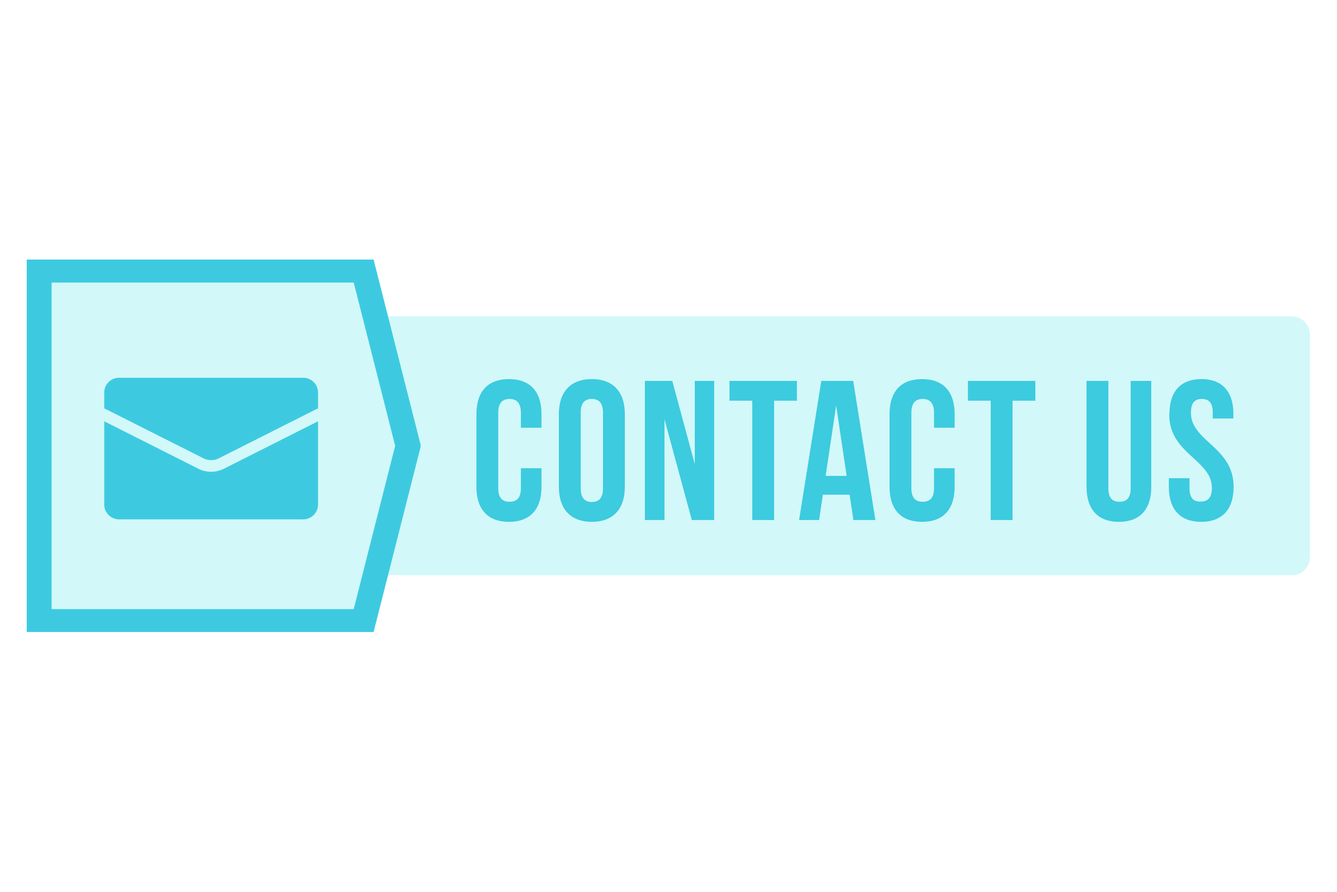
<style>
.page{position:relative;width:1337px;height:892px;background:#ffffff}
.page>*{position:absolute;margin:0}
.t1{font:198.4px "BebasNeueBold";letter-spacing:0.03em;color:#3dcbe0}
</style>
<div class="page">
<p class="t1" style="left:477px;top:379px;width:757px;height:143px">CONTACT US</p>
</div>
